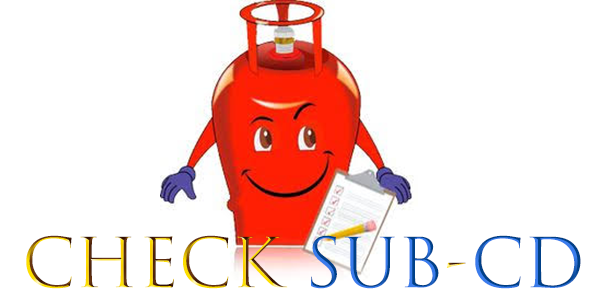
<style>
.page{position:relative;width:600px;height:300px;background:#ffffff}
.page>*{position:absolute;margin:0}
.t1{font:66.7px "TrajanColor-Concept"}
</style>
<div class="page">
<p class="t1" style="left:26px;top:235px;width:555px;height:54px">CHECK SUB-CD</p>
</div>
